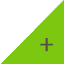
<style>
.page{position:relative;width:64px;height:64px;background:#ffffff}
.page>*{position:absolute;margin:0}
.t1{font:24px "EuphemiaCAS";letter-spacing:-0.05em;color:#564c48;font-weight:bold}
</style>
<div class="page">
<p class="t1" style="left:40px;top:38px;width:13px;height:14px">+</p>
</div>
